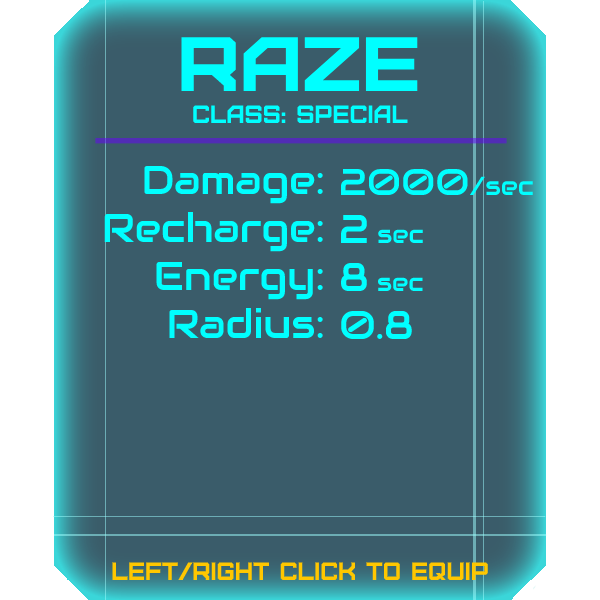
<style>
.page{position:relative;width:600px;height:600px;background:#3a5c6a}
.page>*{position:absolute;margin:0}
.t1{font:76.8px "Furore";color:#00ffff;scale:1.13 1}
.t2{font:25px "Furore";color:#00ffff}
.t3{font:40px "Audiowide-Regular";color:#00ffff}
.t4{font:37px "Audiowide-Regular";color:#00ffff}
.t5{font:26px "Audiowide-Regular";color:#00ffff}
.t6{font:25px "Audiowide-Regular";color:#00ffff}
.t7{font:25px "Furore";color:#ffc700}
</style>
<div class="page">
<p class="t1" style="left:181px;top:37px;width:237px;height:54px">Raze</p>
<p class="t2" style="left:193px;top:105px;width:215px;height:18px">Class: Special</p>
<p class="t3" style="left:104px;top:165px;width:219px;height:173px;text-align:right">Damage:<br>Recharge:<br>Energy:<br>Radius:</p>
<p class="t4" style="left:340px;top:169px;width:193px;height:170px">2000<span class="t5">/sec<br></span><span class="t3">2 </span><span class="t6">sec<br></span><span class="t3">8 </span><span class="t6">sec<br></span><span class="t3">0.8</span></p>
<p class="t7" style="left:112px;top:562px;width:376px;height:18px">left/right click to equip</p>
</div>
